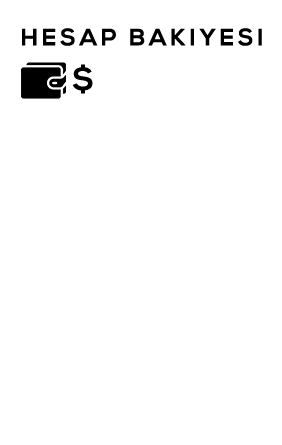
<style>
.page{position:relative;width:282px;height:445px;background:#ffffff}
.page>*{position:absolute;margin:0}
.t1{font:23.4px "NexaBold";letter-spacing:0.17em;color:#000000}
.t2{font:31px "NexaBold";letter-spacing:0.17em;color:#000000}
</style>
<div class="page">
<p class="t1" style="left:22px;top:28px;width:240px;height:18px">HESAP BAKIYESI</p>
<p class="t2" style="left:72px;top:64px;width:21px;height:30px">$</p>
</div>
